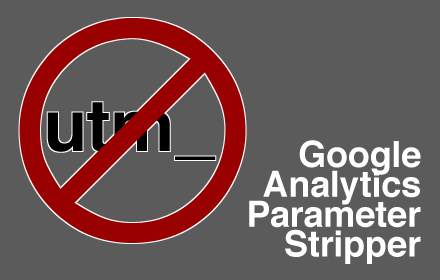
<style>
.page{position:relative;width:440px;height:280px;background:#5b5b5b}
.page>*{position:absolute;margin:0}
.t1{font:36px/29.8px "Helvetica-Bold";color:#ffffff}
</style>
<div class="page">
<p class="t1" style="left:249px;top:140px;width:172px;height:124px;text-align:right">Google<br>Analytics<br>Parameter<br>Stripper</p>
</div>
